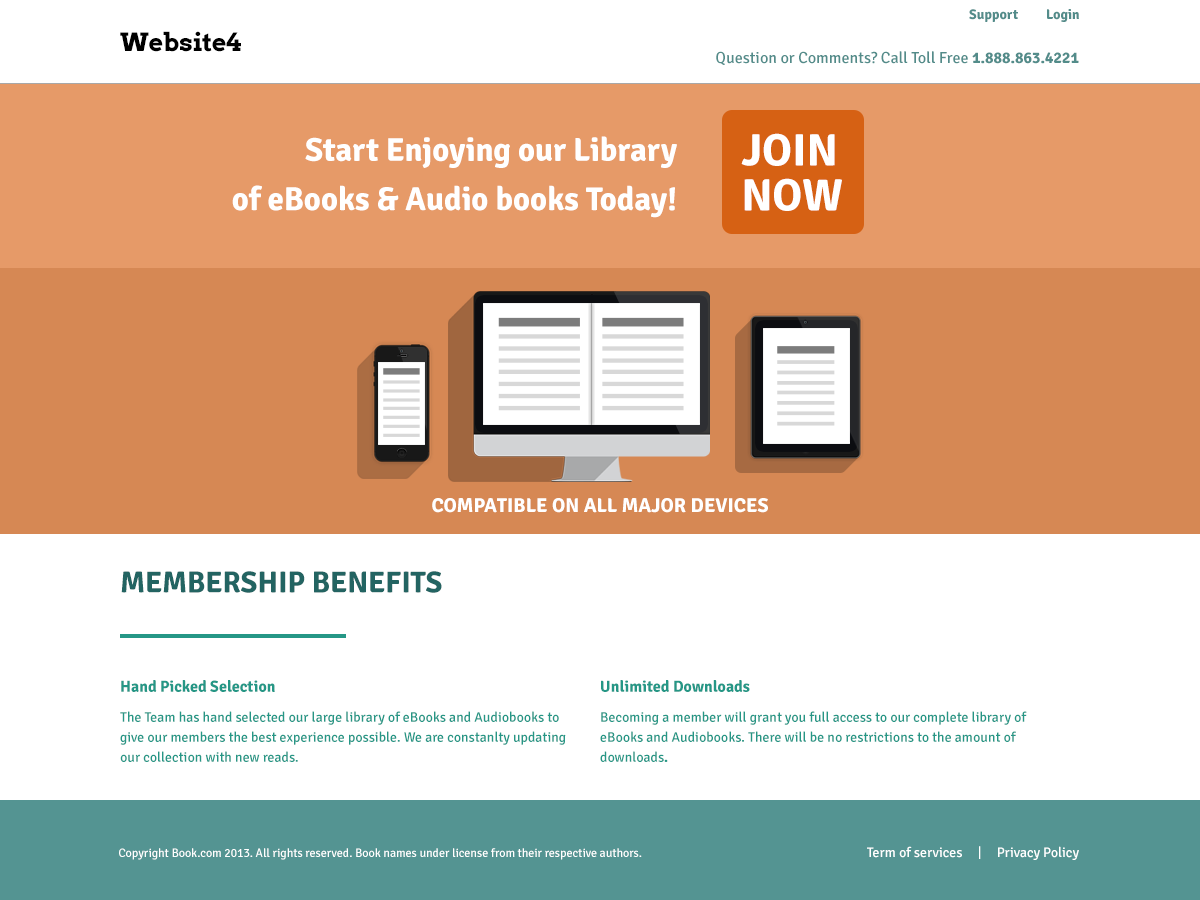
<style>
.page{position:relative;width:1200px;height:900px;background:#ffffff}
.page>*{position:absolute;margin:0}
.t1{font:14px "Signika-Bold";color:#538c8a}
.t2{font:25px "Arvo-Bold";color:#000000}
.t3{font:16px "Signika-Regular";color:#538c8a}
.t4{font:16px "Signika-Bold";color:#538c8a}
.t5{font:33px/49.2px "Signika-Bold";color:#ffffff}
.t6{font:45px/45px "Signika-Bold";color:#ffffff;text-transform:uppercase}
.t7{font:20px "Signika-Bold";color:#ffffff;text-transform:uppercase}
.t8{font:30px "Signika-Bold";color:#236462;text-transform:uppercase}
.t9{font:14px/20px "Signika-Regular";color:#259786}
.t10{font:16px/20px "Signika-Bold";color:#259786}
.t11{font:14px/20px "Signika-Bold";color:#259786}
.t12{font:14px "Signika-Regular";color:#ffffff}
.t13{font:12px "Signika-Regular";color:#ffffff}
</style>
<div class="page">
<p class="t1" style="left:969px;top:9px;width:110px;height:13px">Support         Login</p>
<p class="t2" style="left:120px;top:31px;width:121px;height:21px">Website4</p>
<p class="t3" style="left:716px;top:51px;width:363px;height:14px">Question or Comments? Call Toll Free <span class="t4">1.888.863.4221</span></p>
<p class="t5" style="left:232px;top:136px;width:445px;height:82px;text-align:right">Start Enjoying our Library<br>of eBooks &amp; Audio books Today!</p>
<p class="t6" style="left:741px;top:133px;width:101px;height:78px">Join<br>Now</p>
<p class="t7" style="left:432px;top:498px;width:336px;height:15px">Compatible on All Major Devices</p>
<p class="t8" style="left:121px;top:571px;width:321px;height:22px">Membership Benefits</p>
<p class="t9" style="left:120px;top:680px;width:446px;height:82px"><span class="t10">Hand Picked Selection<br></span>The Team has hand selected our large library of eBooks and Audiobooks to give our members the best experience possible. We are constanlty updating our collection with new reads.</p>
<p class="t9" style="left:600px;top:680px;width:427px;height:82px"><span class="t10">Unlimited Downloads<br></span>Becoming a member will grant you full access to our complete library of eBooks and Audiobooks. There will be no restrictions to the amount of downloads<span class="t11">.</span></p>
<p class="t12" style="left:867px;top:846px;width:212px;height:14px">Term of services     |     Privacy Policy</p>
<p class="t13" style="left:119px;top:848px;width:523px;height:12px">Copyright Book.com 2013. All rights reserved. Book names under license from their respective authors.</p>
</div>
